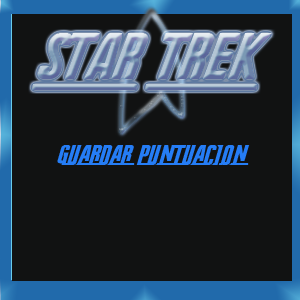
<style>
.page{position:relative;width:300px;height:300px;background:#111212}
.page>*{position:absolute;margin:0}
.t1{font:65.4px "RadiumCorp";scale:1.1 1}
.t2{font:22.1px "RadiumCorp";color:#257df6;scale:1.3 1}
</style>
<div class="page">
<p class="t1" style="left:32px;top:33px;width:240px;height:57px">star trek</p>
<p class="t2" style="left:57px;top:145px;width:193px;height:20px">GUARDAR PUNTUACION</p>
</div>
